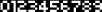
<style>
.page{position:relative;width:102px;height:12px;background:#000000}
.page>*{position:absolute;margin:0}
.t1{font:18px "04b03";letter-spacing:-0.025em;color:#ffffff;text-transform:uppercase}
</style>
<div class="page">
<p class="t1" style="left:0px;top:0px;width:102px;height:12px">0123456789</p>
</div>
